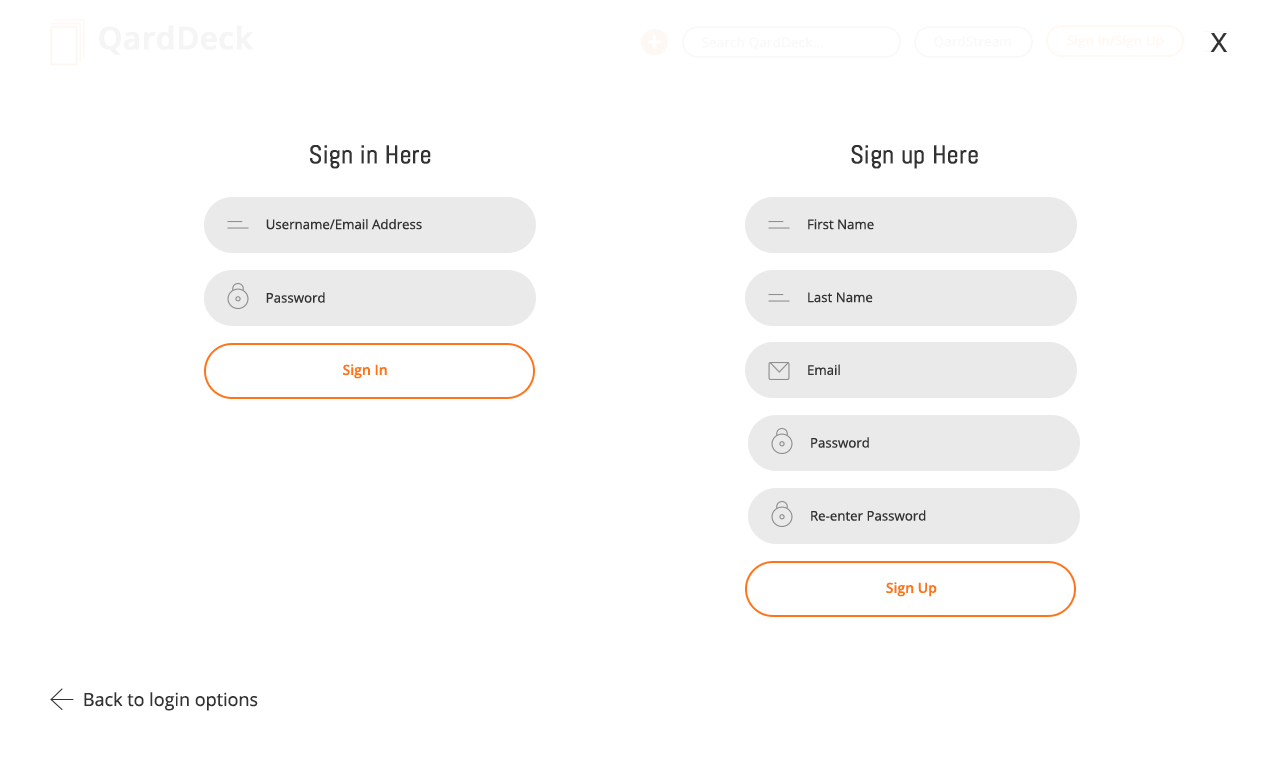
<style>
.page{position:relative;width:1280px;height:768px;background:#ffffff}
.page>*{position:absolute;margin:0}
.t1{font:30.9px "OpenSans-Semibold";color:#f5f5f5;font-weight:bold}
.t2{font:13px "OpenSans";color:#f9f9f9;font-weight:bold}
.t3{font:13px "OpenSans";color:#fff8f3;font-weight:bold}
.t4{font:25.4px "Abel-Regular";color:#323232;font-weight:bold}
.t5{font:13.3px "OpenSans";color:#323232}
.t6{font:14px "OpenSans-Semibold";color:#ff741b}
.t7{font:18px "OpenSans";color:#323232}
</style>
<div class="page">
<p class="t1" style="left:99px;top:25px;width:154px;height:30px">QardDeck</p>
<p class="t2" style="left:702px;top:36px;width:122px;height:14px">Search QardDeck...</p>
<p class="t2" style="left:934px;top:35px;width:77px;height:14px">QardStream</p>
<p class="t3" style="left:1067px;top:35px;width:97px;height:14px">Sign in/Sign Up</p>
<p class="t4" style="left:310px;top:145px;width:121px;height:24px">Sign in Here</p>
<p class="t4" style="left:851px;top:145px;width:127px;height:24px">Sign up Here</p>
<p class="t5" style="left:266px;top:219px;width:156px;height:11px">Username/Email Address</p>
<p class="t5" style="left:808px;top:219px;width:66px;height:11px">First Name</p>
<p class="t5" style="left:266px;top:292px;width:59px;height:11px">Password</p>
<p class="t5" style="left:808px;top:292px;width:65px;height:11px">Last Name</p>
<p class="t6" style="left:343px;top:364px;width:44px;height:15px">Sign In</p>
<p class="t5" style="left:808px;top:364px;width:32px;height:11px">Email</p>
<p class="t5" style="left:811px;top:437px;width:58px;height:11px">Password</p>
<p class="t5" style="left:811px;top:510px;width:115px;height:11px">Re-enter Password</p>
<p class="t6" style="left:886px;top:582px;width:51px;height:15px">Sign Up</p>
<p class="t7" style="left:84px;top:692px;width:174px;height:19px">Back to login options</p>
</div>
